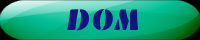
<style>
.page{position:relative;width:200px;height:40px}
.page>*{position:absolute;margin:0}
.t1{font:31px "EmblemaOne-Regular";color:#15137f}
</style>
<div class="page">
<p class="t1" style="left:67px;top:9px;width:72px;height:22px">DOM</p>
</div>
